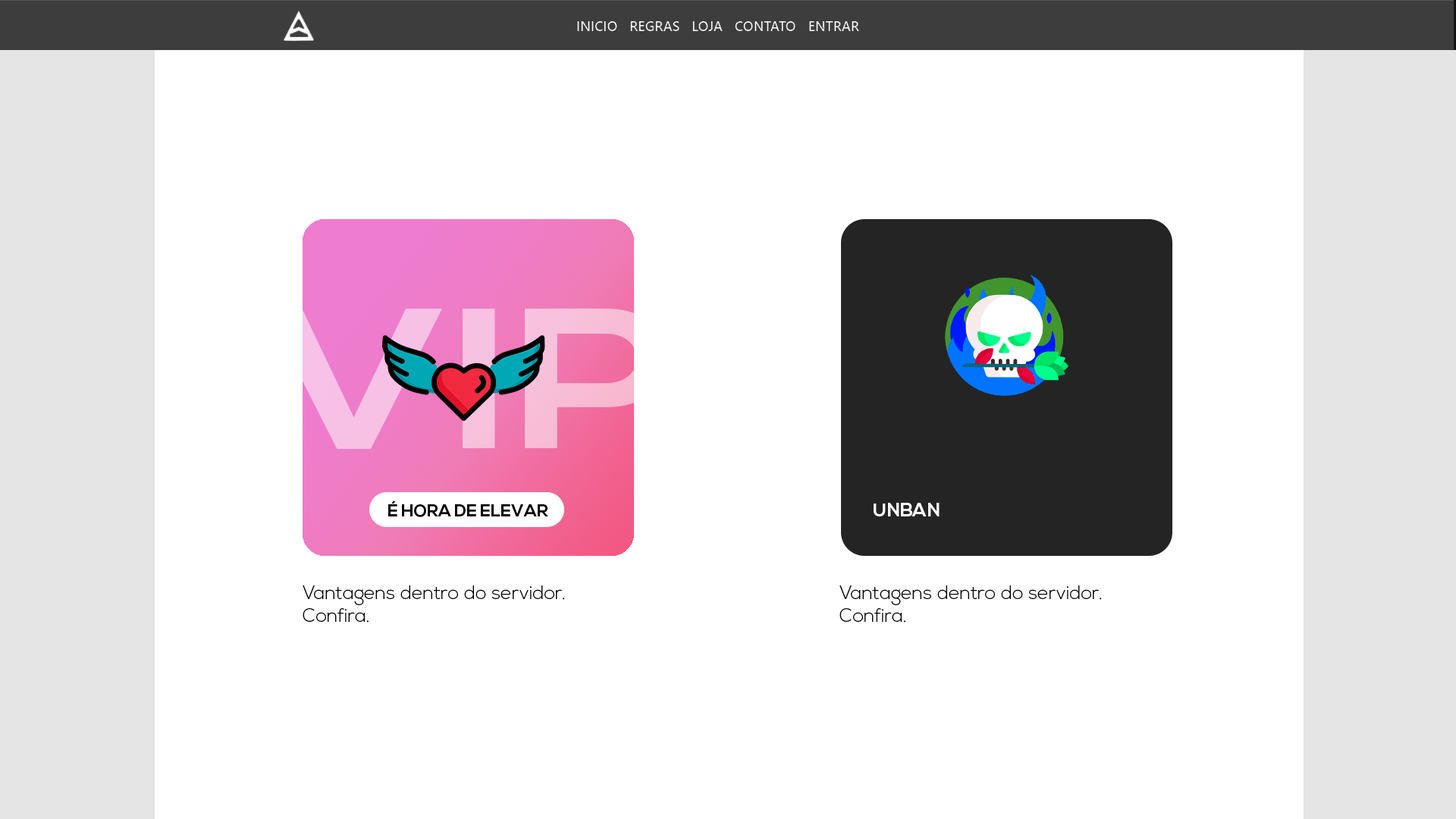
<style>
.page{position:relative;width:1456px;height:819px;background:#ffffff}
.page>*{position:absolute;margin:0}
.t1{font:16.9px "NexaBold";color:#000000}
.t2{font:18.6px "NexaBold";color:#ffffff}
.t3{font:18.6px "NexaLight";color:#000000}
</style>
<div class="page">
<p class="t1" style="left:388px;top:500px;width:160px;height:17px">É HORA DE ELEVAR</p>
<p class="t2" style="left:874px;top:503px;width:66px;height:13px">UNBAN</p>
<p class="t3" style="left:303px;top:585px;width:262px;height:38px">Vantagens dentro do servidor. <br>Confira.</p>
<p class="t3" style="left:839px;top:585px;width:263px;height:38px">Vantagens dentro do servidor. <br>Confira.</p>
</div>
